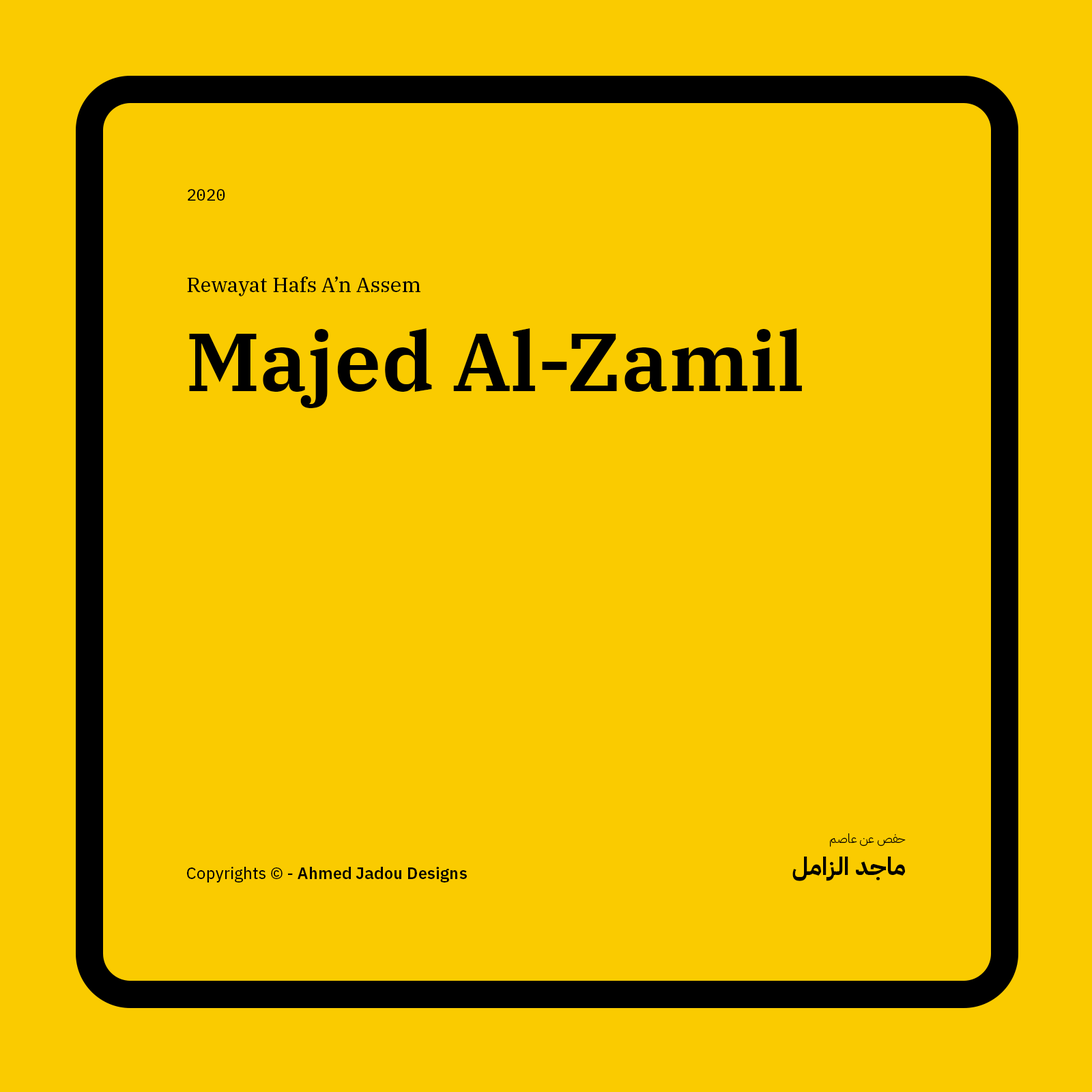
<style>
.page{position:relative;width:1092px;height:1092px;background:#facb00}
.page>*{position:absolute;margin:0}
.t1{font:16.4px "IBMPlexMono-Text";color:#000000}
.t2{font:20.5px "IBMPlexSerif-Text";color:#000000}
.t3{font:81.9px "IBMPlexSerif-SemiBold";color:#000000}
.t4{font:12.3px "IBMPlexArabic-Light";color:#000000}
.t5{font:24.6px "IBMPlexArabic-Bold";color:#000000}
.t6{font:16.4px "IBMPlexSans-SemiBold";color:#000000}
.t7{font:16.4px "IBMPlexSans-Text";color:#000000}
</style>
<div class="page">
<p class="t1" style="left:188px;top:189px;width:37px;height:12px">2020</p>
<p class="t2" style="left:187px;top:276px;width:233px;height:20px">Rewayat Hafs A’n Assem</p>
<p class="t3" style="left:189px;top:328px;width:613px;height:80px">Majed Al-Zamil</p>
<p class="t4" style="left:830px;top:833px;width:76px;height:14px">حفص عن عاصم</p>
<p class="t5" style="left:792px;top:857px;width:113px;height:24px">ماجد الزامل</p>
<p class="t6" style="left:187px;top:867px;width:280px;height:15px"><span class="t7">Copyrights © - </span>Ahmed Jadou Designs</p>
</div>
